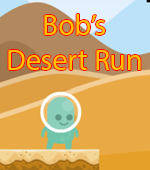
<style>
.page{position:relative;width:150px;height:170px;background:#e9aa45}
.page>*{position:absolute;margin:0}
.t1{font:29.6px "MyriadPro-Regular";color:#ffc000}
</style>
<div class="page">
<p class="t1" style="left:8px;top:14px;width:133px;height:56px;text-align:center">Bob’s<br>Desert Run</p>
</div>
